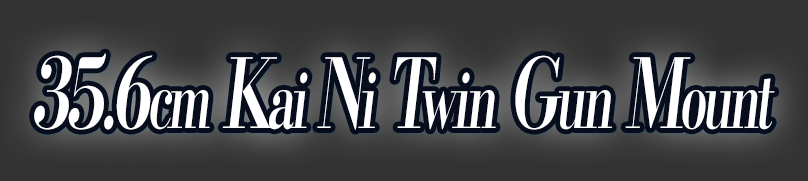
<style>
.page{position:relative;width:808px;height:181px;background:#333333}
.page>*{position:absolute;margin:0}
.t1{font:96px "KochoStd-Heavy";letter-spacing:-0.08em;color:#ffffff;font-style:italic;scale:0.65 1}
.t2{font:76.8px "KochoStd-Heavy";letter-spacing:-0.08em;color:#ffffff;font-style:italic;scale:0.65 1}
</style>
<div class="page">
<p class="t1" style="left:34px;top:53px;width:741px;height:77px">35.6<span class="t2">cm</span> K<span class="t2">ai </span>N<span class="t2">i</span> T<span class="t2">win</span> G<span class="t2">un</span> M<span class="t2">ount</span></p>
</div>
